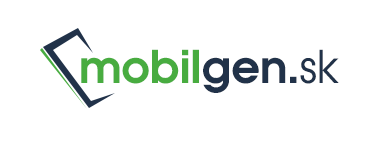
<style>
.page{position:relative;width:384px;height:144px;background:#ffffff}
.page>*{position:absolute;margin:0}
.t1{font:45px "Atlanta-Demi";color:#48ac40}
.t2{font:45px "Atlanta-Demi";color:#213249}
.t3{font:45px "Atlanta-Book";color:#213249}
</style>
<div class="page">
<p class="t1" style="left:81px;top:49px;width:258px;height:44px">mobil<span class="t2">gen.</span><span class="t3">sk</span></p>
</div>
